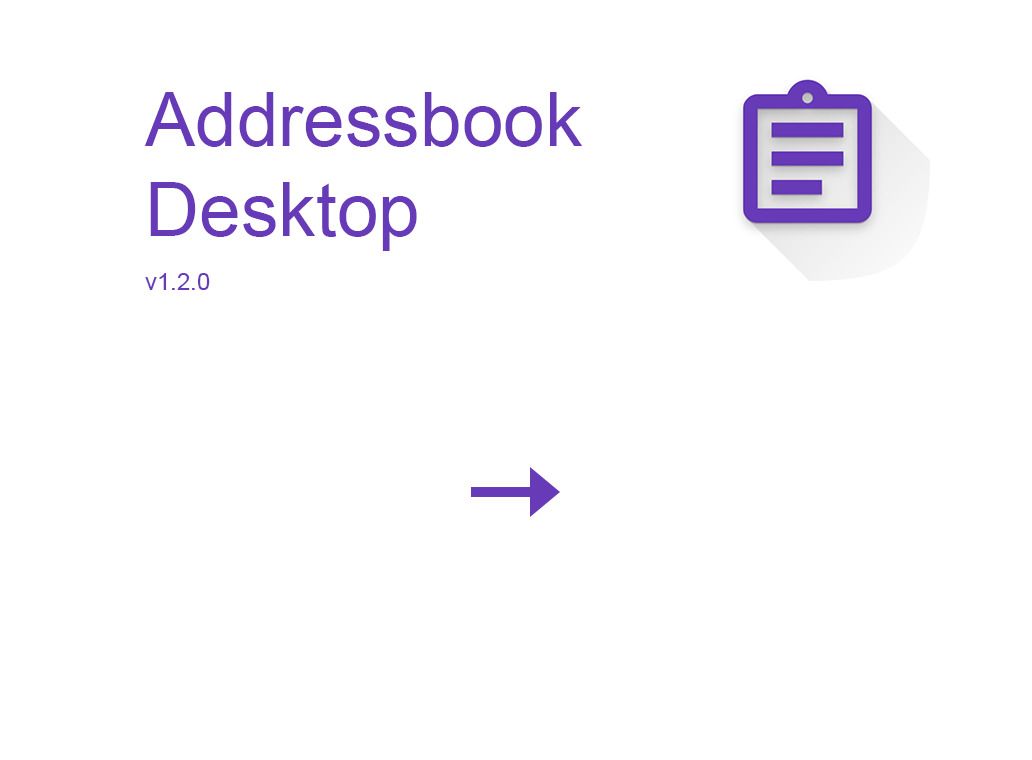
<style>
.page{position:relative;width:1032px;height:760px;background:#ffffff}
.page>*{position:absolute;margin:0}
.t1{font:75px "ArialMT";color:#673ab7}
.t2{font:24px "ArialMT";color:#673ab7}
</style>
<div class="page">
<p class="t1" style="left:144px;top:92px;width:438px;height:159px">Addressbook<br>Desktop</p>
<p class="t2" style="left:145px;top:273px;width:65px;height:17px">v1.2.0</p>
</div>
